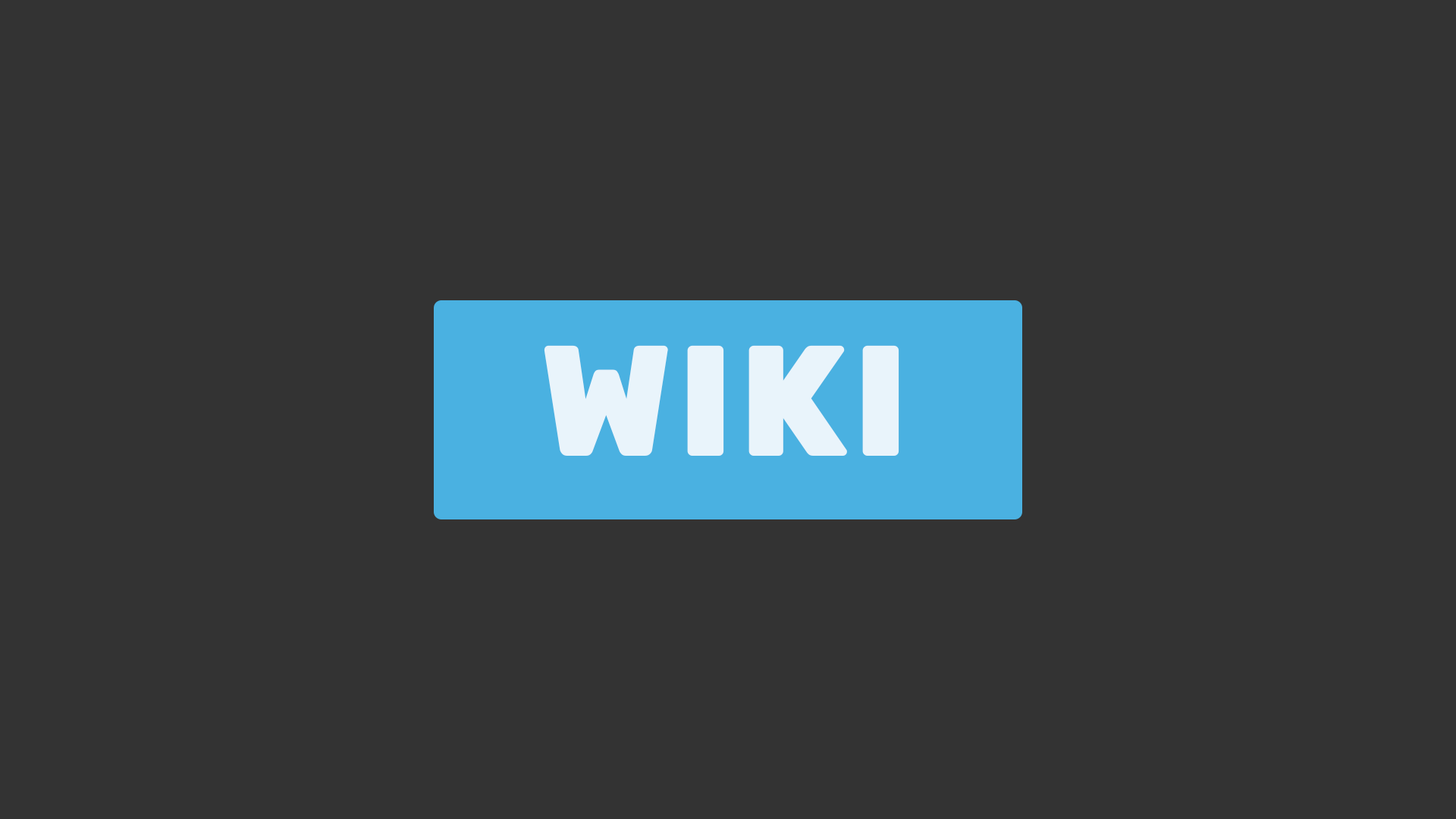
<style>
.page{position:relative;width:1456px;height:819px;background:#333333}
.page>*{position:absolute;margin:0}
.t1{font:155.1px "Rubik-ExtraBold";letter-spacing:0.02em;color:#ffffff;font-weight:bold}
</style>
<div class="page">
<p class="t1" style="left:544px;top:345px;width:355px;height:111px;opacity:0.85">WIKI</p>
</div>
